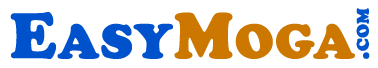
<style>
.page{position:relative;width:378px;height:68px;background:#ffffff}
.page>*{position:absolute;margin:0}
.t1{font:50px "CooperBlack";color:#0052cc;font-weight:bold}
.t2{font:66.7px "CooperBlack";color:#0052cc;font-weight:bold}
.t3{font:66.7px "CooperBlack";color:#cc7700;font-weight:bold}
.t4{font:50px "CooperBlack";color:#cc7700;font-weight:bold}
.t5{font:25px "CooperBlack";color:#0055cc;font-variant:small-caps;font-weight:bold}
</style>
<div class="page">
<p class="t1" style="left:10px;top:12px;width:345px;height:47px"><span class="t2">E</span>ASY<span class="t3">M</span><span class="t4">OGA</span></p>
<p class="t5" style="left:356px;top:8px;width:14px;height:51px;rotate:-90deg">.com</p>
</div>
